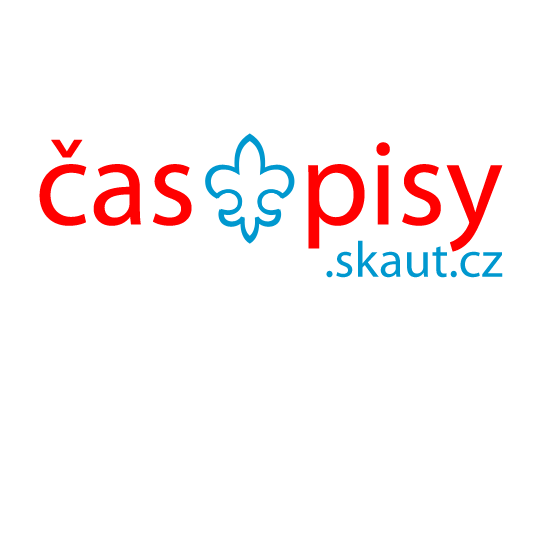
<style>
.page{position:relative;width:542px;height:542px;background:#ffffff}
.page>*{position:absolute;margin:0}
.t1{font:121.8px "MyriadPro-Regular";color:#ff0000}
.t2{font:50.8px "MyriadPro-Regular";color:#0098cf}
</style>
<div class="page">
<p class="t1" style="left:39px;top:139px;width:464px;height:113px">čas    pisy</p>
<p class="t2" style="left:326px;top:240px;width:177px;height:38px">.skaut.cz</p>
</div>
